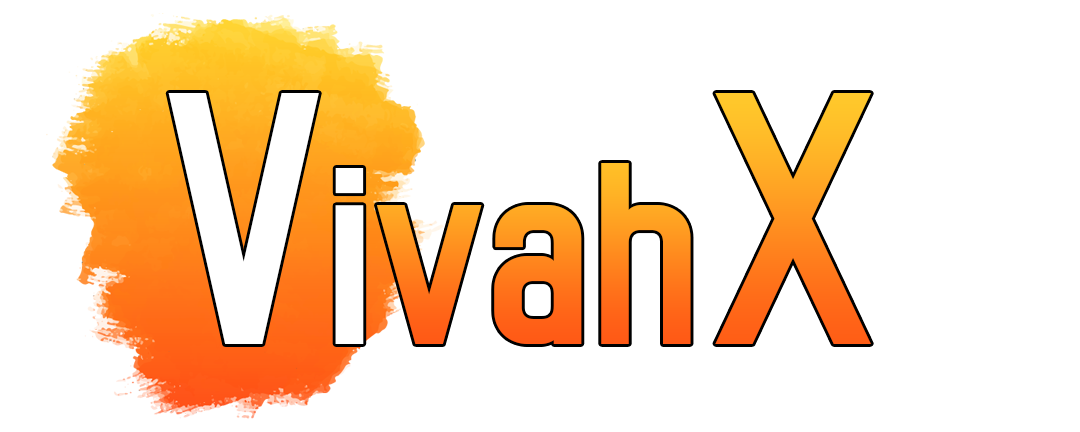
<style>
.page{position:relative;width:1080px;height:432px;background:#ffffff}
.page>*{position:absolute;margin:0}
.t1{font:306.6px "BRHDev03-Bold";color:#ffffff}
.t2{font:226.6px "BRHDev03-Bold";color:#ffffff}
.t3{font:306.6px "BRHDev03-Bold"}
.t4{font:226.6px "BRHDev03-Bold"}
</style>
<div class="page">
<p class="t1" style="left:168px;top:93px;width:196px;height:251px">V<span class="t2">i</span></p>
<p class="t3" style="left:715px;top:93px;width:156px;height:251px">X</p>
<p class="t4" style="left:377px;top:163px;width:314px;height:181px">vah</p>
</div>
